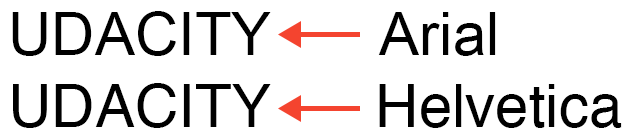
<style>
.page{position:relative;width:632px;height:138px;background:#ffffff}
.page>*{position:absolute;margin:0}
.t1{font:60px "ArialMT";color:#000000}
.t2{font:60px "Helvetica";color:#000000}
</style>
<div class="page">
<p class="t1" style="left:12px;top:11px;width:259px;height:117px">UDACITY<br><span class="t2">UDACITY</span></p>
<p class="t1" style="left:378px;top:12px;width:118px;height:44px">Arial</p>
<p class="t2" style="left:379px;top:84px;width:243px;height:44px">Helvetica</p>
</div>
